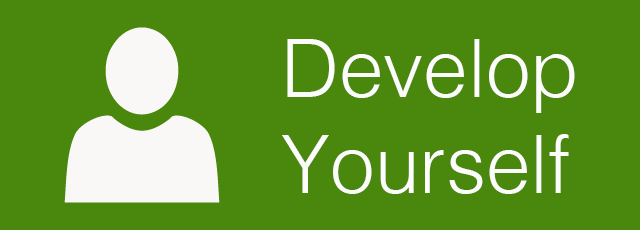
<style>
.page{position:relative;width:640px;height:230px;background:#4a880d}
.page>*{position:absolute;margin:0}
.t1{font:80px "Helvetica-Light";color:#fcfcfb}
</style>
<div class="page">
<p class="t1" style="left:282px;top:39px;width:293px;height:155px">Develop<br>Yourself</p>
</div>
